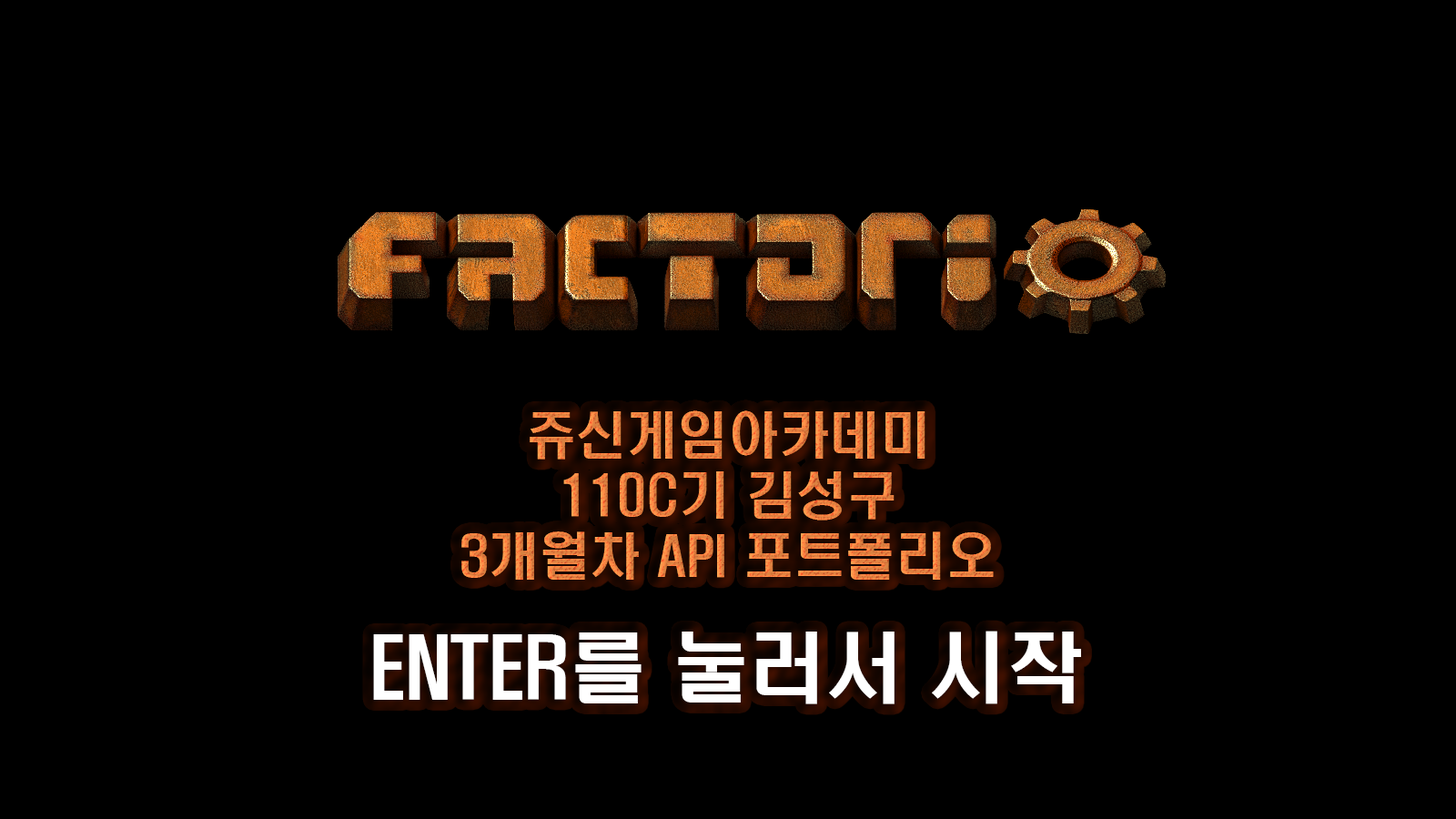
<style>
.page{position:relative;width:1456px;height:819px;background:#000000}
.page>*{position:absolute;margin:0}
.t1{font:50.6px "H2hdrM"}
.t2{font:77.1px "H2hdrM";color:#ffffff}
</style>
<div class="page">
<p class="t1" style="left:461px;top:410px;width:533px;height:170px;text-align:center">쥬신게임아카데미<br>110C기 김성구<br>3개월차 API 포트폴리오</p>
<p class="t2" style="left:373px;top:631px;width:708px;height:73px">ENTER를 눌러서 시작</p>
</div>
